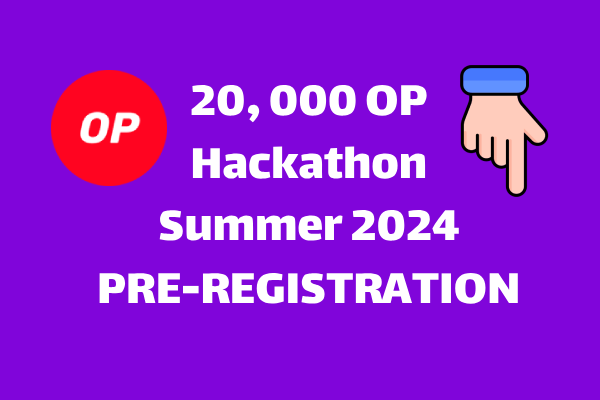
<style>
.page{position:relative;width:600px;height:400px;background:#8005da}
.page>*{position:absolute;margin:0}
.t1{font:52px "Lalezar-Regular";color:#ffffff}
</style>
<div class="page">
<p class="t1" style="left:99px;top:84px;width:419px;height:220px;text-align:center">20, 000 OP<br>Hackathon<br>Summer 2024<br>PRE-REGISTRATION</p>
</div>
